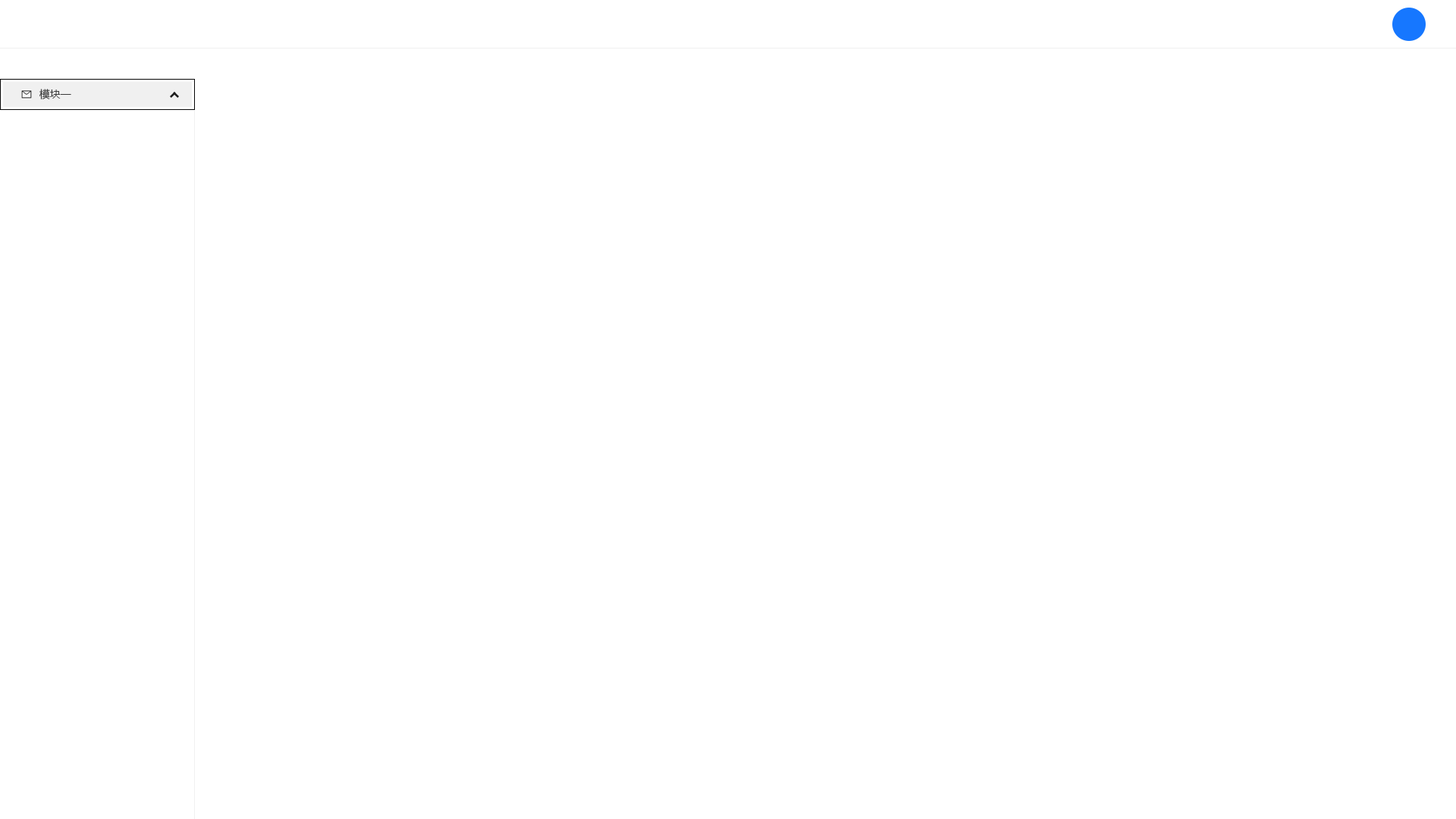
<style>
.page{position:relative;width:1456px;height:819px;background:#ffffff}
.page>*{position:absolute;margin:0}
.t1{font:10.6px "MicrosoftYaHei";color:#393939}
</style>
<div class="page">
<p class="t1" style="left:39px;top:89px;width:32px;height:10px">模块一</p>
</div>
